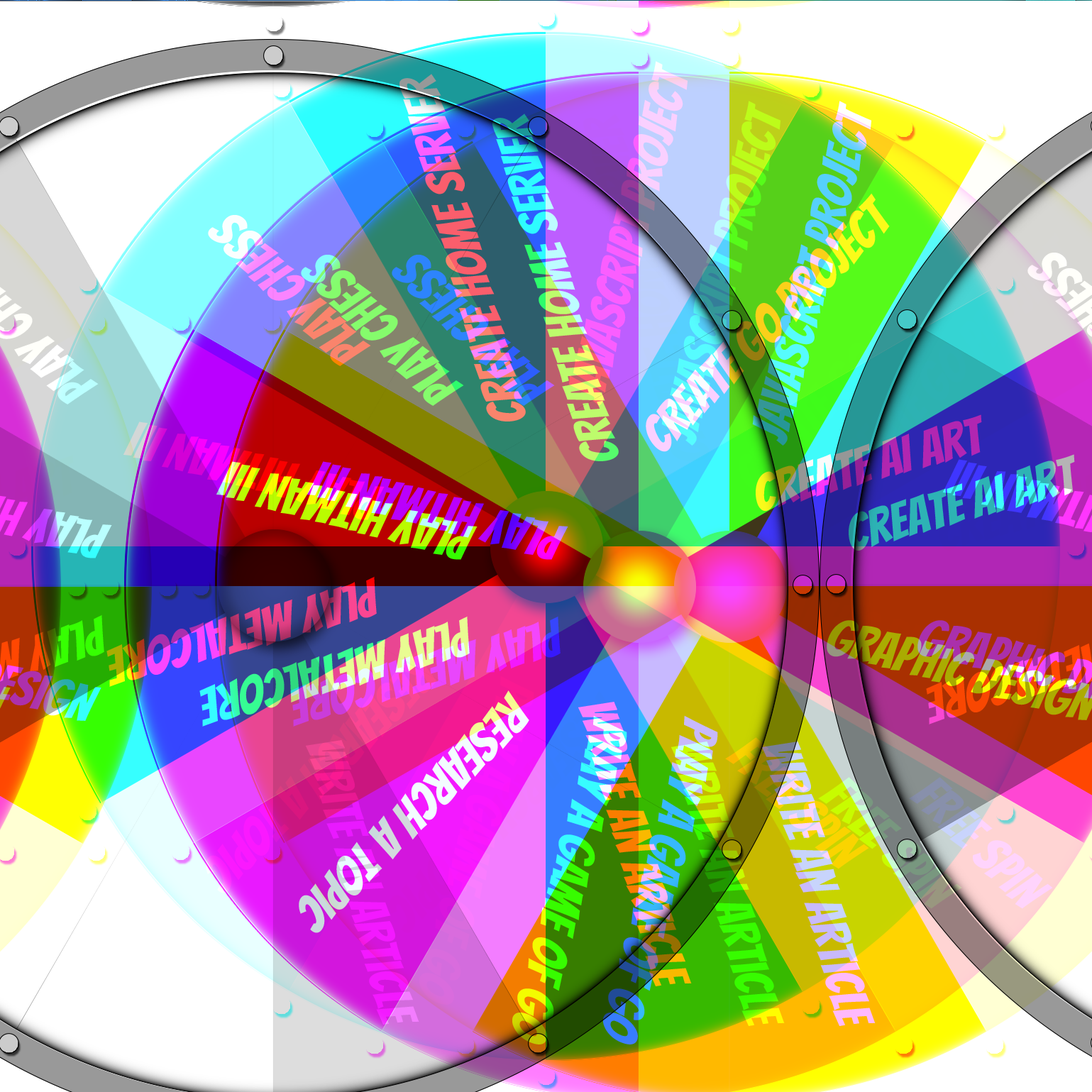
<style>
.page{position:relative;width:1092px;height:1092px}
.page>*{position:absolute;margin:0}
.t1{font:51.1px "Bangers-Regular"}
</style>
<div class="page">
<p class="t1" style="left:568px;top:60px;width:120px;height:345px;rotate:-75deg">JavaScript Project</p>
<p class="t1" style="left:399px;top:73px;width:127px;height:348px;rotate:-105deg">Create Home Server</p>
<p class="t1" style="left:646px;top:192px;width:244px;height:259px;rotate:-45deg">Create Go Project</p>
<p class="t1" style="left:208px;top:214px;width:163px;height:151px;rotate:-135deg">Play Chess</p>
<p class="t1" style="left:756px;top:414px;width:226px;height:96px;rotate:-15deg">Create AI Art</p>
<p class="t1" style="left:123px;top:421px;width:262px;height:98px;rotate:-165deg">Play Hitman III</p>
<p class="t1" style="left:106px;top:575px;width:271px;height:111px;rotate:165deg">Play Metalcore</p>
<p class="t1" style="left:578px;top:701px;width:114px;height:285px;rotate:75deg">Write an Article</p>
<p class="t1" style="left:725px;top:737px;width:144px;height:131px;rotate:45deg">Free Spin</p>
</div>
